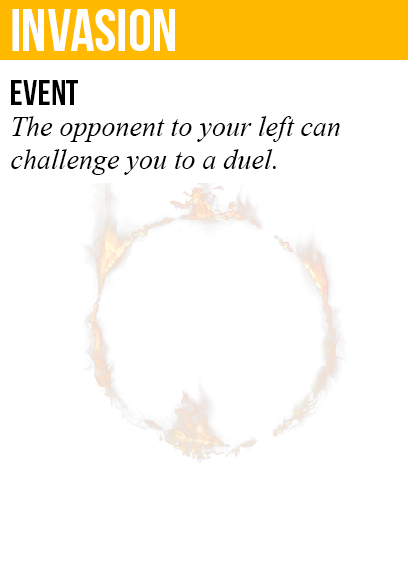
<style>
.page{position:relative;width:408px;height:585px;background:#ffffff}
.page>*{position:absolute;margin:0}
.t1{font:60px "BebasNeue";color:#ffffff}
.t2{font:36px "BebasNeue";color:#000000}
.t3{font:28px "TimesNewRomanPS-ItalicMT";color:#000000}
</style>
<div class="page">
<p class="t1" style="left:12px;top:9px;width:163px;height:42px">invasion</p>
<p class="t2" style="left:11px;top:80px;width:67px;height:25px">event</p>
<p class="t3" style="left:11px;top:116px;width:329px;height:59px">The opponent to your left can<br>challenge you to a duel.</p>
</div>
